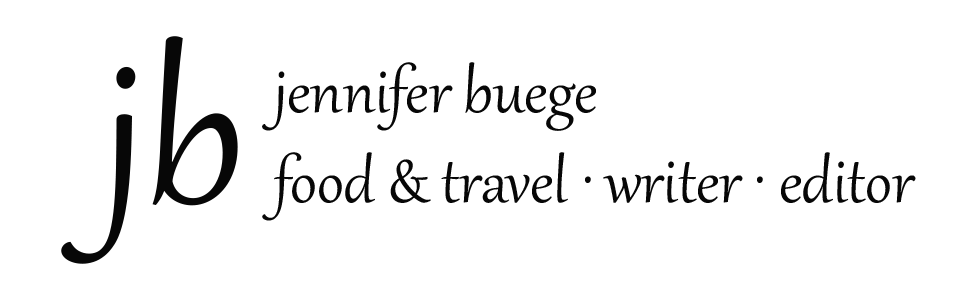
<style>
.page{position:relative;width:954px;height:300px;background:#ffffff}
.page>*{position:absolute;margin:0}
.t1{font:250px "Gabriola";color:#070707}
.t2{font:75px "Gabriola";color:#070707}
</style>
<div class="page">
<p class="t1" style="left:61px;top:36px;width:177px;height:228px">jb</p>
<p class="t2" style="left:262px;top:62px;width:654px;height:159px">jennifer buege<br>food &amp; travel · writer · editor</p>
</div>
